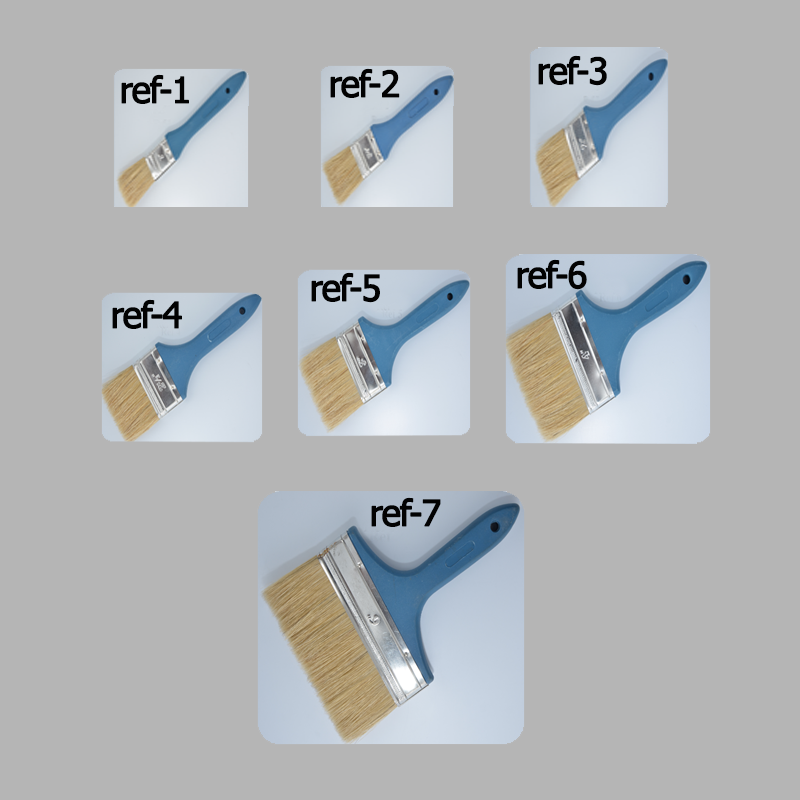
<style>
.page{position:relative;width:800px;height:800px;background:#b5b5b5}
.page>*{position:absolute;margin:0}
.t1{font:36px "Tahoma";letter-spacing:-0.05em;color:#020202;font-weight:bold}
</style>
<div class="page">
<p class="t1" style="left:538px;top:55px;width:69px;height:31px">ref-3</p>
<p class="t1" style="left:121px;top:74px;width:68px;height:30px">ref-1</p>
<p class="t1" style="left:330px;top:68px;width:70px;height:30px">ref-2</p>
<p class="t1" style="left:517px;top:259px;width:70px;height:31px">ref-6</p>
<p class="t1" style="left:311px;top:272px;width:69px;height:31px">ref-5</p>
<p class="t1" style="left:112px;top:299px;width:70px;height:30px">ref-4</p>
<p class="t1" style="left:371px;top:497px;width:70px;height:30px">ref-7</p>
</div>
